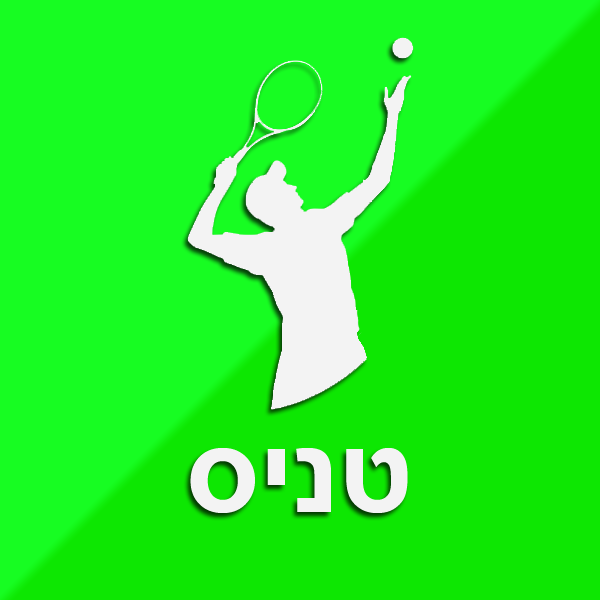
<style>
.page{position:relative;width:600px;height:600px;background:#17fd22}
.page>*{position:absolute;margin:0}
.t1{font:120px "Arial-BoldMT";color:#f3f3f3}
</style>
<div class="page">
<p class="t1" style="left:190px;top:448px;width:218px;height:65px">סינט</p>
</div>
